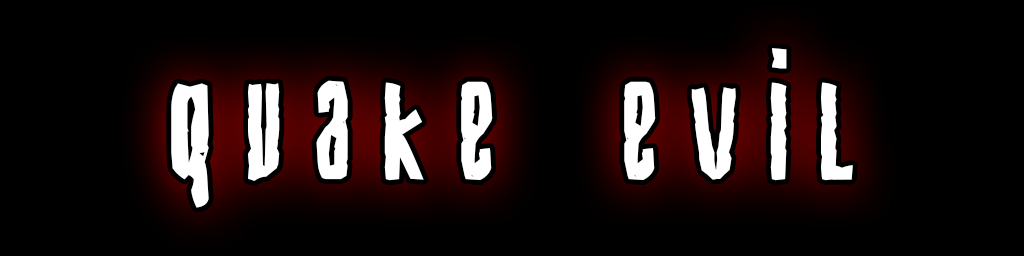
<style>
.page{position:relative;width:1024px;height:256px;background:#000000}
.page>*{position:absolute;margin:0}
.t1{font:250px "Biohazard";letter-spacing:0.1em;color:#ffffff}
</style>
<div class="page">
<p class="t1" style="left:171px;top:48px;width:682px;height:160px">quake evil</p>
</div>
